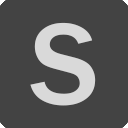
<style>
.page{position:relative;width:128px;height:128px;background:#434343}
.page>*{position:absolute;margin:0}
.t1{font:120px "FranklinGothic-Medium";color:#d9d9d9}
</style>
<div class="page">
<p class="t1" style="left:30px;top:22px;width:66px;height:84px">S</p>
</div>
